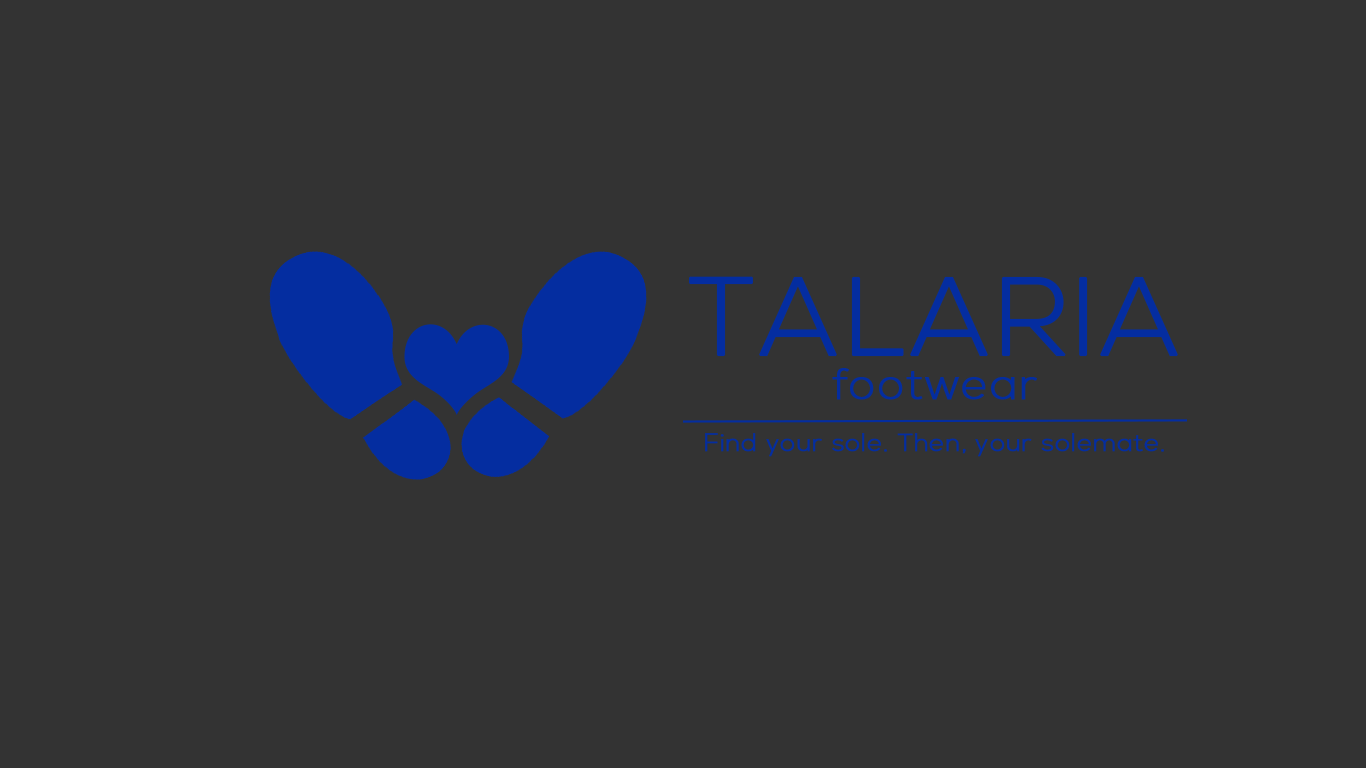
<style>
.page{position:relative;width:1366px;height:768px;background:#333333}
.page>*{position:absolute;margin:0}
.t1{font:44.2px/44.2px "NexaLight";letter-spacing:0.025em;color:#042da0;font-weight:bold}
.t2{font:110.5px/44.2px "NexaLight";letter-spacing:0.025em;color:#042da0;font-weight:bold}
.t3{font:24.9px "NexaLight";letter-spacing:0.025em;color:#042da0;font-weight:bold}
</style>
<div class="page">
<p class="t1" style="left:689px;top:276px;width:489px;height:124px;text-align:center"><span class="t2">TALARIA<br></span>footwear</p>
<p class="t3" style="left:705px;top:433px;width:459px;height:24px">Find your sole. Then, your solemate.</p>
</div>
